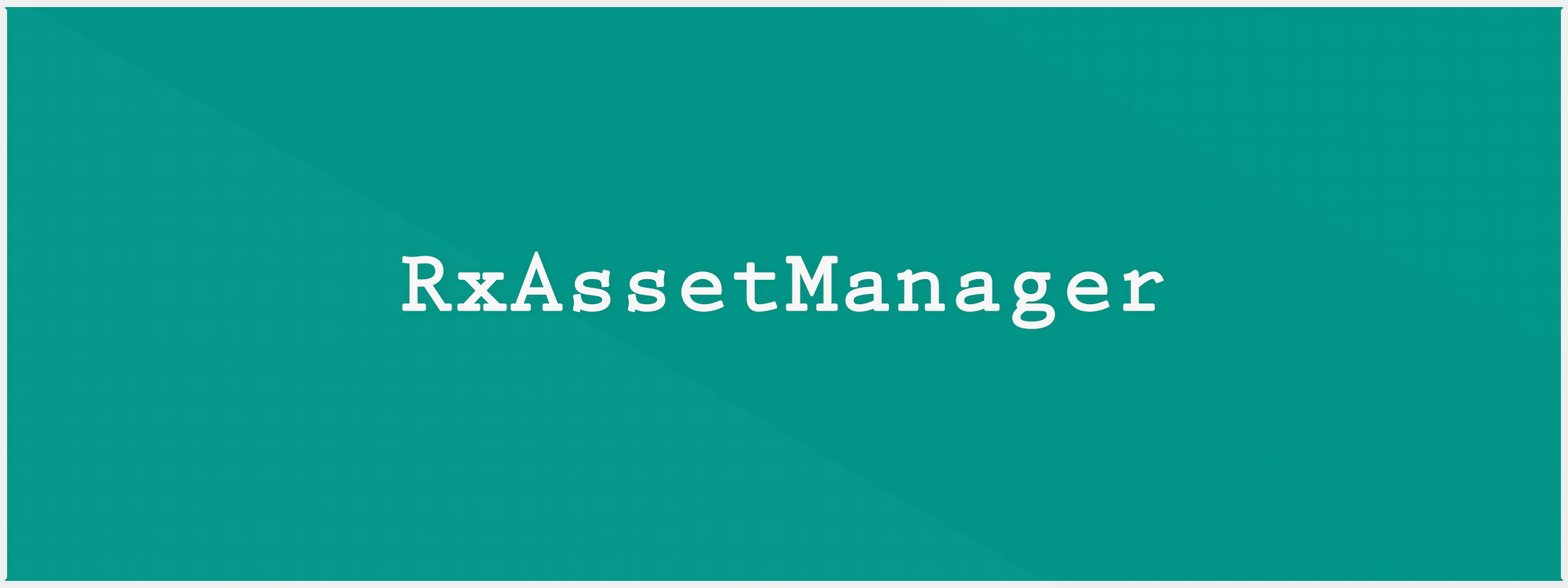
<style>
.page{position:relative;width:1568px;height:588px}
.page>*{position:absolute;margin:0}
.t1{font:87.8px "PrestigeEliteStd-Bd";color:#f7f7f7;font-weight:bold}
</style>
<div class="page">
<p class="t1" style="left:402px;top:251px;width:762px;height:78px">RxAssetManager</p>
</div>
